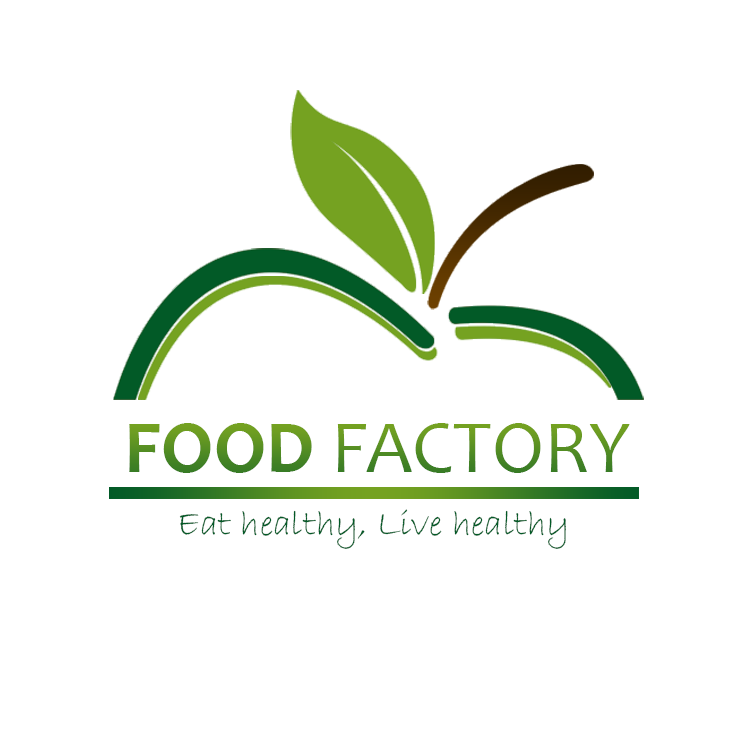
<style>
.page{position:relative;width:750px;height:750px;background:#ffffff}
.page>*{position:absolute;margin:0}
.t1{font:75px "Candara"}
.t2{font:75px "Candara-Bold"}
.t3{font:37.1px "BradleyHandITC";color:#025a27}
</style>
<div class="page">
<p class="t1" style="left:129px;top:423px;width:501px;height:50px"><span class="t2">FOOD </span>FACTORY</p>
<p class="t3" style="left:179px;top:509px;width:387px;height:40px">Eat healthy, Live healthy</p>
</div>
